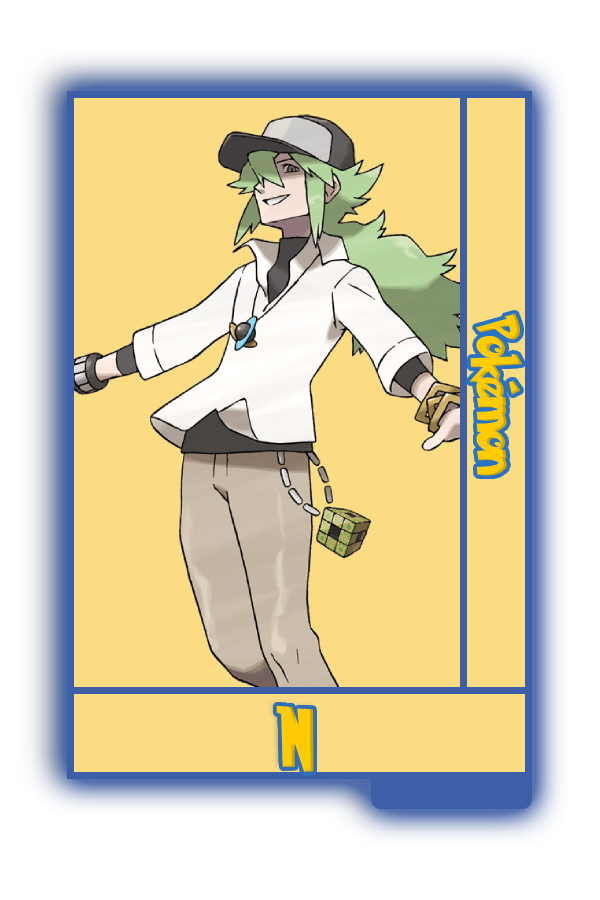
<style>
.page{position:relative;width:600px;height:900px;background:#fbdc83}
.page>*{position:absolute;margin:0}
.t1{font:48.8px "PokemonSolidNormal";color:#ffcb05;scale:0.8 1}
.t2{font:56.6px "PokemonSolidNormal";color:#ffcb05;scale:0.92 1}
</style>
<div class="page">
<p class="t1" style="left:469px;top:313px;width:54px;height:163px;rotate:90deg">Pokémon</p>
<p class="t2" style="left:276px;top:705px;width:38px;height:67px">N</p>
</div>
